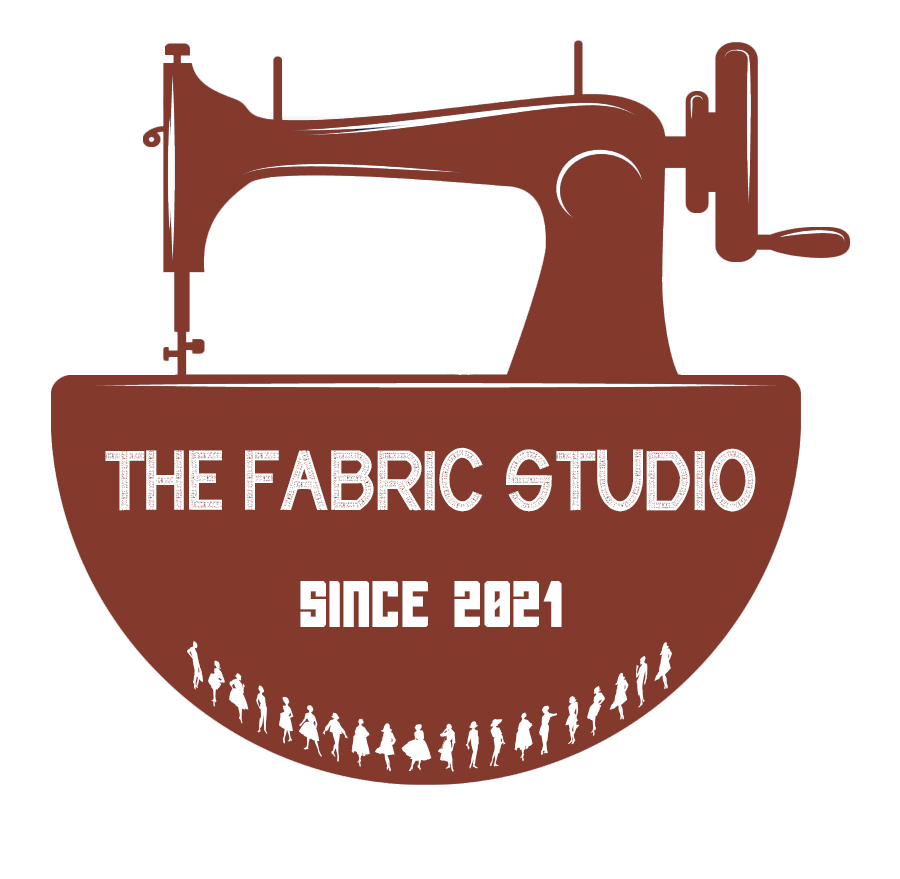
<style>
.page{position:relative;width:900px;height:879px;background:#ffffff}
.page>*{position:absolute;margin:0}
.t1{font:72px "CFIndustrialFabrics-Regular";color:#ffffff}
.t2{font:48px "Tallbolder-Regular";color:#ffffff}
.t3{font:48px "SewingPatterns";color:#ffffff}
</style>
<div class="page">
<p class="t1" style="left:105px;top:447px;width:651px;height:65px">The Fabric Studio</p>
<p class="t2" style="left:300px;top:581px;width:262px;height:46px">Since  2021</p>
<p class="t3" style="left:187px;top:641px;width:485px;height:131px;text-align:center">Thefabricstudiojhckc</p>
</div>
